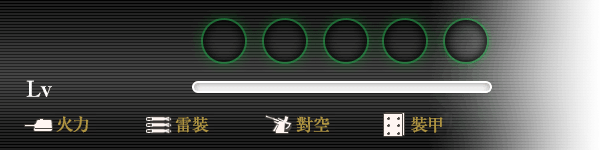
<style>
.page{position:relative;width:600px;height:150px}
.page>*{position:absolute;margin:0}
.t1{font:17px "RyuminPro-Medium";color:#af9441}
</style>
<div class="page">
<p class="t1" style="left:56px;top:116px;width:33px;height:17px">火力</p>
<p class="t1" style="left:175px;top:116px;width:34px;height:17px">雷裝</p>
<p class="t1" style="left:296px;top:116px;width:34px;height:17px">對空</p>
<p class="t1" style="left:411px;top:116px;width:32px;height:17px">裝甲</p>
</div>
